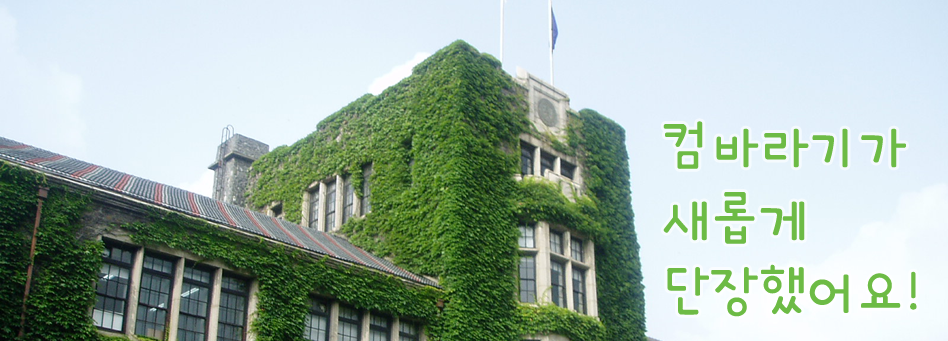
<style>
.page{position:relative;width:948px;height:341px}
.page>*{position:absolute;margin:0}
.t1{font:60.7px "HeummBombi152";color:#6dbb45}
</style>
<div class="page">
<p class="t1" style="left:663px;top:121px;width:254px;height:196px">컴바라기가<br>새롭게<br>단장했어요!</p>
</div>
